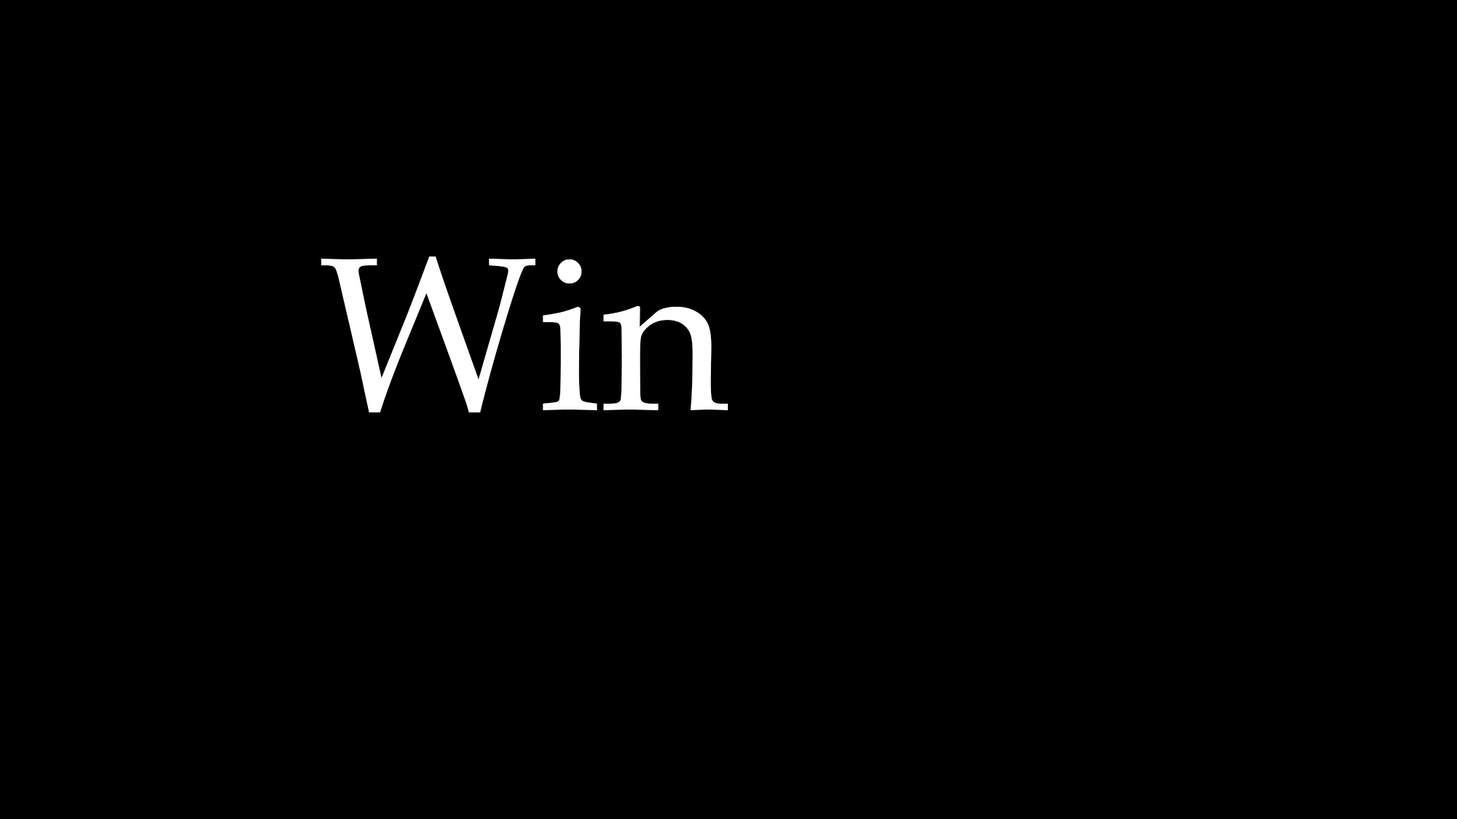
<style>
.page{position:relative;width:1457px;height:819px;background:#000000}
.page>*{position:absolute;margin:0}
.t1{font:218.5px "BookAntiqua";color:#ffffff}
</style>
<div class="page">
<p class="t1" style="left:321px;top:256px;width:407px;height:156px">Win</p>
</div>
